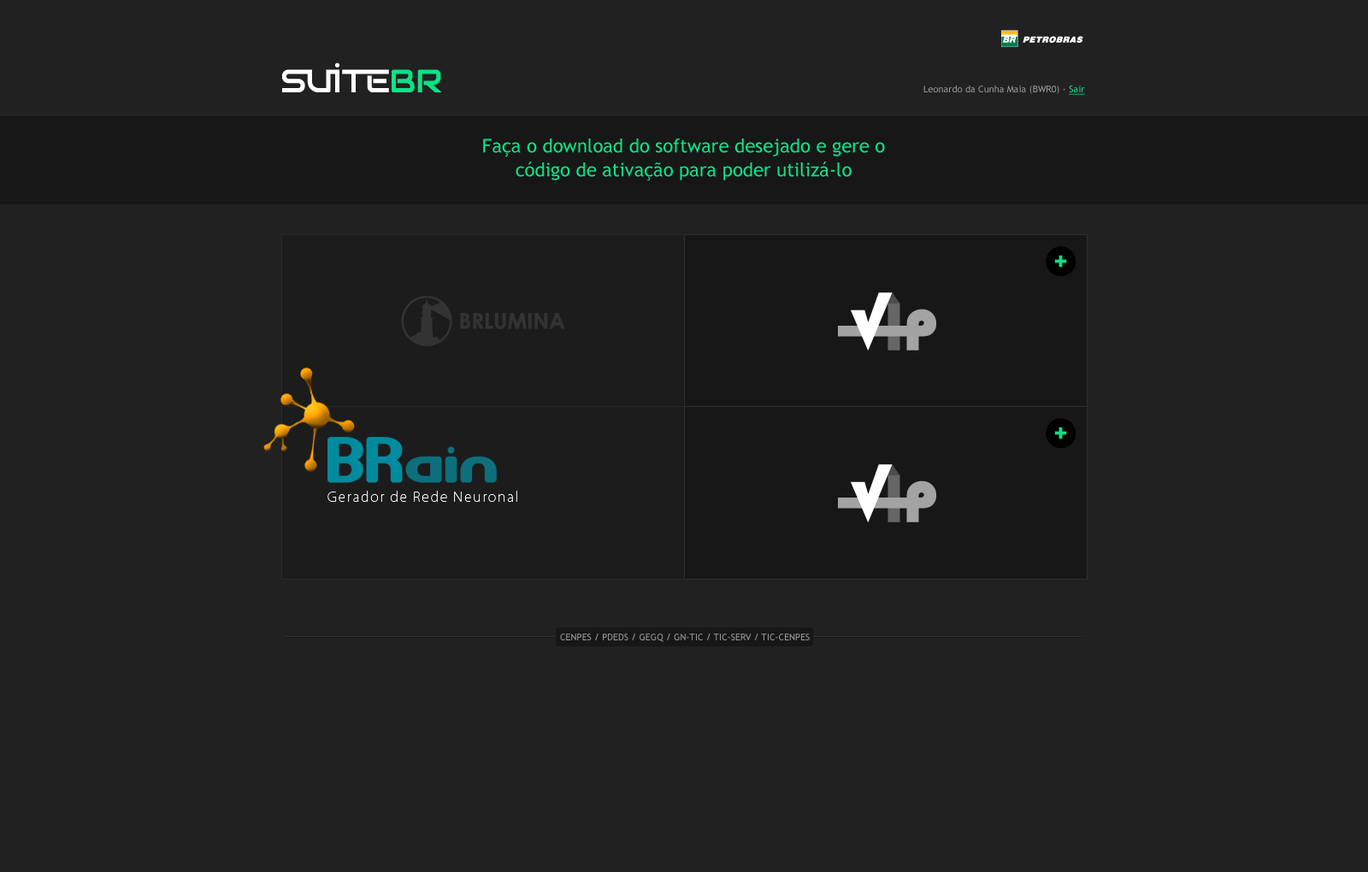
<style>
.page{position:relative;width:1368px;height:872px;background:#212121}
.page>*{position:absolute;margin:0}
.t1{font:9.4px "TrebuchetMS";color:#999999}
.t2{font:9.4px "TrebuchetMS";color:#0ae285;text-decoration:underline}
.t3{font:18.8px/23.9px "TrebuchetMS";color:#0ae285}
</style>
<div class="page">
<p class="t1" style="left:923px;top:85px;width:162px;height:10px">Leonardo da Cunha Maia (BWR0) - <span class="t2">Sair</span></p>
<p class="t3" style="left:483px;top:138px;width:402px;height:43px;text-align:center">Faça o download do software desejado e gere o<br>código de ativação para poder utilizá-lo</p>
<p class="t1" style="left:560px;top:633px;width:249px;height:9px">CENPES / PDEDS / GEGQ / GN-TIC / TIC-SERV / TIC-CENPES</p>
</div>
